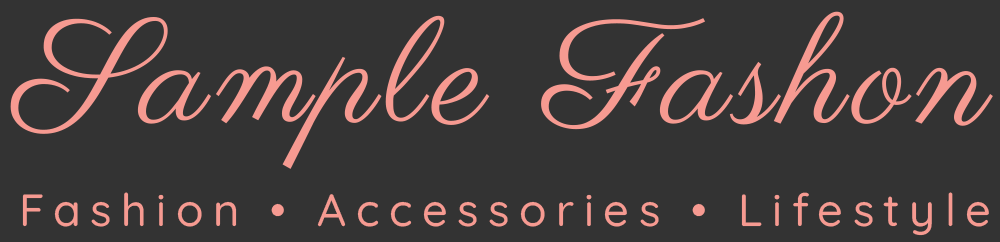
<style>
.page{position:relative;width:1000px;height:242px;background:#333333}
.page>*{position:absolute;margin:0}
.t1{font:147.7px "Parisienne-Regular";letter-spacing:0.05em;color:#f69a91}
.t2{font:45.2px "Quicksand-Medium";letter-spacing:0.21em;color:#f69a91}
</style>
<div class="page">
<p class="t1" style="left:10px;top:11px;width:983px;height:158px">Sample Fashon</p>
<p class="t2" style="left:22px;top:192px;width:967px;height:44px">Fashion • Accessories • Lifestyle</p>
</div>
